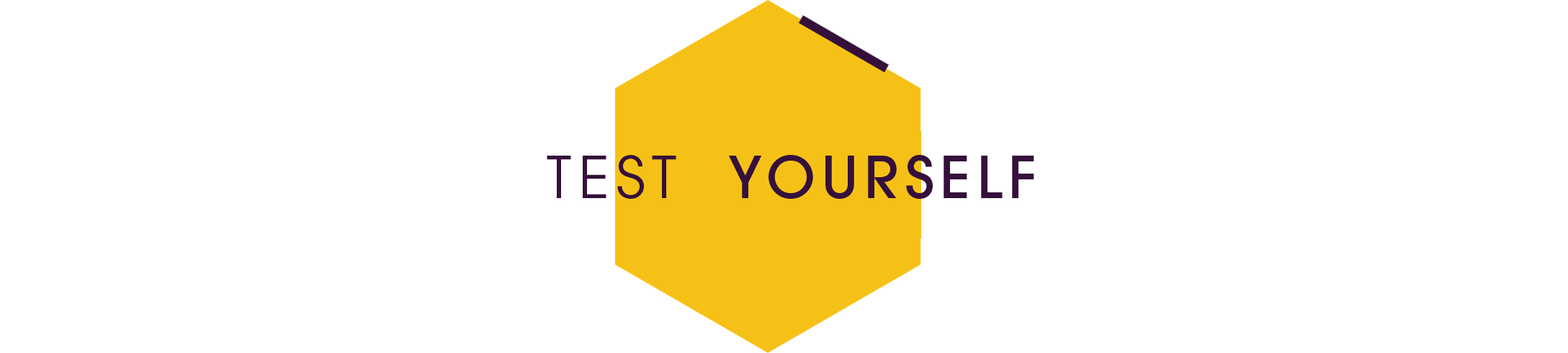
<style>
.page{position:relative;width:1568px;height:353px;background:#ffffff}
.page>*{position:absolute;margin:0}
.t1{font:57.6px "AvantGarde-Medium";letter-spacing:0.11em;color:#35103b}
.t2{font:57.6px "AvantGardeCE-Book";letter-spacing:0.12em;color:#35103b}
</style>
<div class="page">
<p class="t1" style="left:547px;top:155px;width:487px;height:44px"><span class="t2">TEST  </span>YOURSELF</p>
</div>
